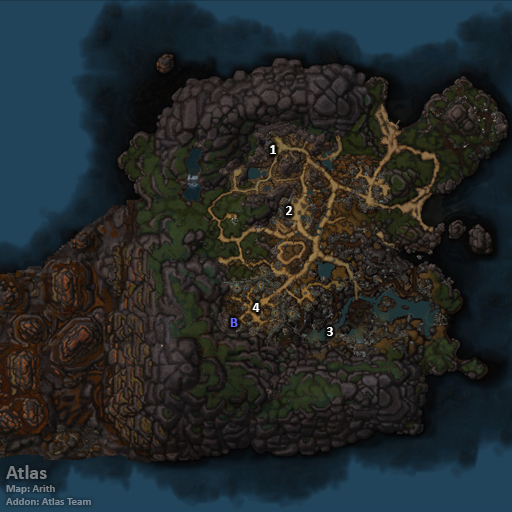
<style>
.page{position:relative;width:512px;height:512px}
.page>*{position:absolute;margin:0}
.t1{font:14px "Calibri-Bold";color:#ffffff}
.t2{font:14px "Calibri-Bold";color:#6666ff}
.t3{font:11px "Calibri-Bold";color:#7a8084}
.t4{font:20px "Calibri-Bold";color:#7a8084}
</style>
<div class="page">
<p class="t1" style="left:270px;top:145px;width:6px;height:9px">1</p>
<p class="t1" style="left:286px;top:206px;width:7px;height:9px">2</p>
<p class="t1" style="left:252px;top:303px;width:8px;height:9px">4</p>
<p class="t2" style="left:230px;top:318px;width:8px;height:9px">B</p>
<p class="t1" style="left:327px;top:327px;width:6px;height:9px">3</p>
<p class="t3" style="left:6px;top:465px;width:85px;height:40px"><span class="t4">Atlas<br></span>Map: Arith<br>Addon: Atlas Team</p>
</div>
